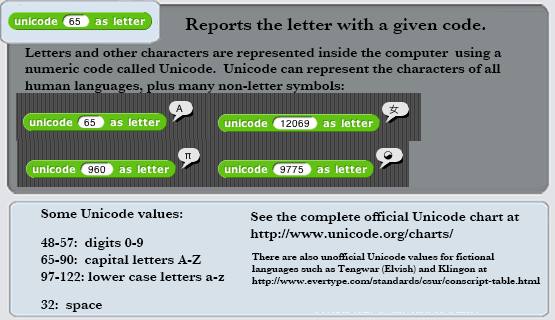
<style>
.page{position:relative;width:555px;height:320px;background:#d6e1ea}
.page>*{position:absolute;margin:0}
.t1{font:18px "Baskerville-SemiBold";color:#000000}
.t2{font:14px "Baskerville-SemiBold";color:#000000}
.t3{font:10px "Baskerville-SemiBold";color:#000000}
</style>
<div class="page">
<p class="t1" style="left:185px;top:18px;width:301px;height:16px">Reports the letter with a given code.</p>
<p class="t2" style="left:25px;top:47px;width:477px;height:46px">Letters and other characters are represented inside the computer  using a<br>numeric code called Unicode.  Unicode can represent the characters of all<br>human languages, plus many non-letter symbols:</p>
<p class="t2" style="left:41px;top:208px;width:184px;height:104px">Some Unicode values:<br> <br>48-57:  digits 0-9<br>65-90:  capital letters A-Z<br>97-122: lower case letters a-z<br> <br>32:  space</p>
<p class="t2" style="left:250px;top:211px;width:270px;height:30px">See the complete official Unicode chart at<br>http://www.unicode.org/charts/</p>
<p class="t3" style="left:252px;top:253px;width:289px;height:33px">There are also unofficial Unicode values for fictional<br>languages such as Tengwar (Elvish) and Klingon at<br>http://www.evertype.com/standards/csur/conscript-table.html</p>
</div>
